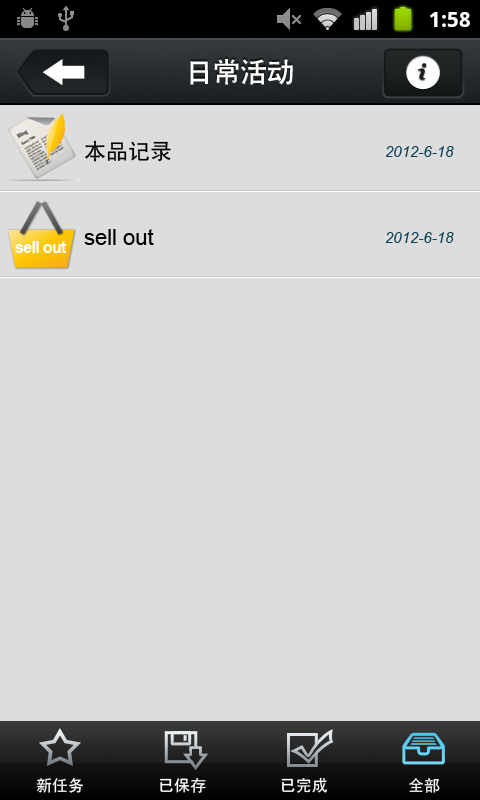
<style>
.page{position:relative;width:480px;height:800px;background:#dddddd}
.page>*{position:absolute;margin:0}
.t1{font:27px "CTCuHeiSJ";color:#ffffff}
.t2{font:22px "SimHei";color:#000000}
.t3{font:15px "Arial-ItalicMT";color:#0e4054}
.t4{font:22px "ArialMT";color:#000000}
.t5{font:15.9px "Arial-BoldMT";letter-spacing:-0.04em;color:#ffffff}
.t6{font:16px "SimHei";color:#ffffff}
</style>
<div class="page">
<p class="t1" style="left:190px;top:59px;width:103px;height:26px">日常活动</p>
<p class="t2" style="left:85px;top:140px;width:86px;height:22px">本品记录</p>
<p class="t3" style="left:385px;top:146px;width:69px;height:11px">2012-6-18</p>
<p class="t4" style="left:84px;top:229px;width:70px;height:16px">sell out</p>
<p class="t3" style="left:385px;top:232px;width:69px;height:11px">2012-6-18</p>
<p class="t5" style="left:15px;top:241px;width:52px;height:12px">sell out</p>
<p class="t6" style="left:36px;top:778px;width:47px;height:15px">新任务</p>
<p class="t6" style="left:160px;top:778px;width:46px;height:15px">已保存</p>
<p class="t6" style="left:281px;top:777px;width:46px;height:16px">已完成</p>
<p class="t6" style="left:409px;top:778px;width:31px;height:15px">全部</p>
</div>
